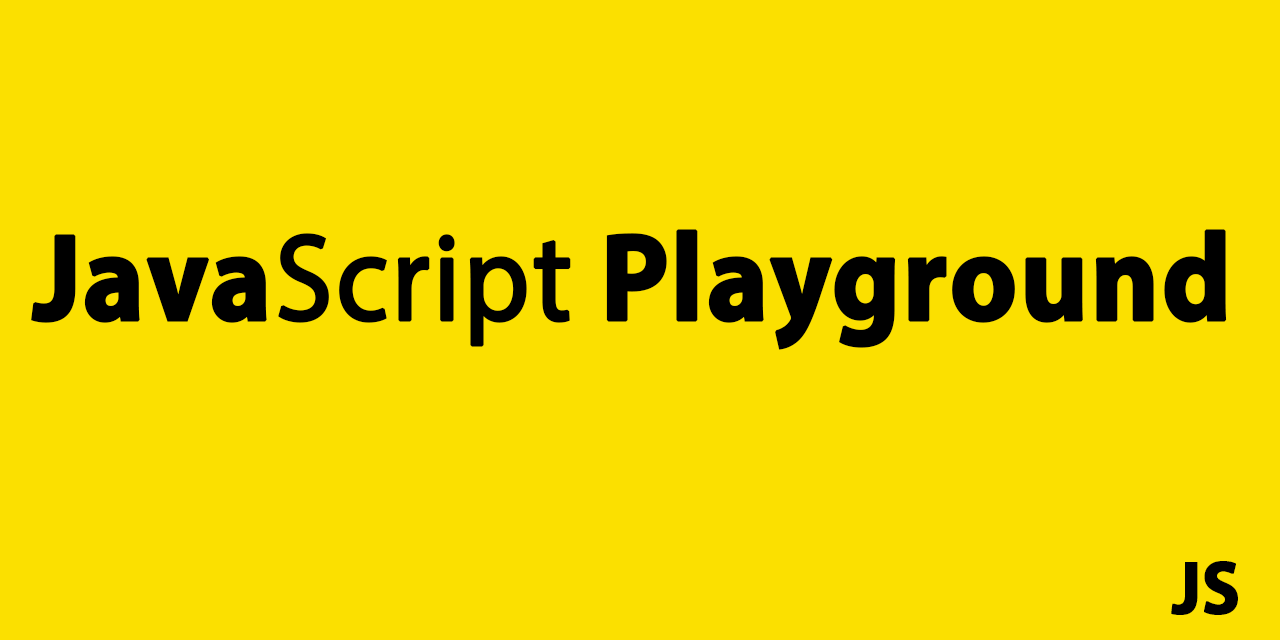
<style>
.page{position:relative;width:1280px;height:640px;background:#fbe000}
.page>*{position:absolute;margin:0}
.t1{font:125px "MyriadPro-Bold";color:#000000;font-weight:bold;scale:0.93 1}
.t2{font:125px "MyriadPro-Regular";color:#000000;font-weight:bold;scale:0.93 1}
.t3{font:75px "MyriadPro-Bold";color:#000000;font-weight:bold;scale:0.93 1}
</style>
<div class="page">
<p class="t1" style="left:31px;top:229px;width:1196px;height:121px">Java<span class="t2">Script</span> Playground</p>
<p class="t3" style="left:1171px;top:561px;width:67px;height:54px">JS</p>
</div>
